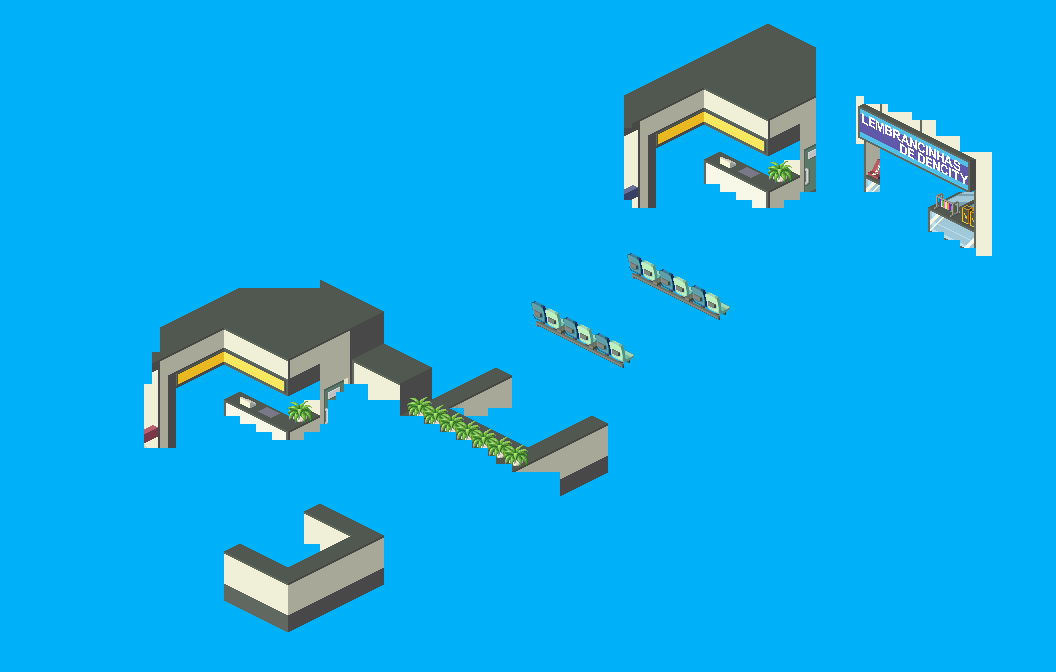
<style>
.page{position:relative;width:1056px;height:672px;background:#00b0f8}
.page>*{position:absolute;margin:0}
.t1{font:13px "Arial-BoldMT";color:#ffffff;scale:1.07 1}
.t2{font:13px "Arial-BoldMT";letter-spacing:-0.08em;color:#ffffff;scale:1.07 1}
.t3{font:13px "Arial-BoldMT";letter-spacing:0.06em;color:#ffffff;scale:1.07 1}
.t4{font:13px "Arial-BoldMT";letter-spacing:0.08em;color:#ffffff;scale:1.07 1}
.t5{font:13px "Arial-BoldMT";letter-spacing:0.1em;color:#ffffff;scale:1.07 1}
</style>
<div class="page">
<p class="t1" style="left:862px;top:113px;width:98px;height:58px;rotate:27deg">LE<span class="t2">M</span>B<span class="t3">R</span>ANCINH<span class="t3">A</span>S</p>
<p class="t1" style="left:900px;top:143px;width:68px;height:41px;rotate:27deg">DE DENC<span class="t4">I</span><span class="t5">T</span>Y</p>
</div>
